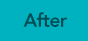
<style>
.page{position:relative;width:88px;height:41px;background:#00b2c0}
.page>*{position:absolute;margin:0}
.t1{font:19px "AvenirLT-Heavy";letter-spacing:-0.035em;color:#004e55}
</style>
<div class="page">
<p class="t1" style="left:23px;top:12px;width:44px;height:15px">After</p>
</div>
